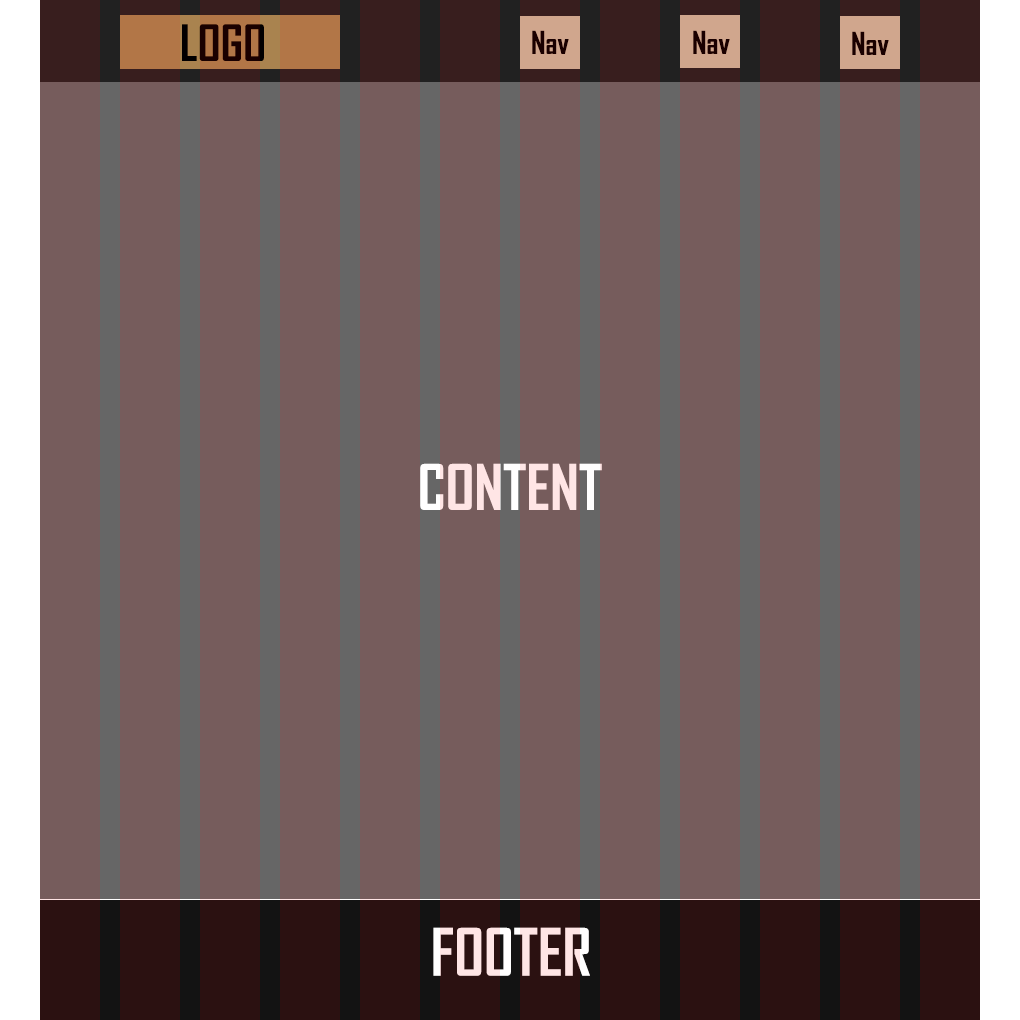
<style>
.page{position:relative;width:1020px;height:1020px;background:#765c5c}
.page>*{position:absolute;margin:0}
.t1{font:48px "AgencyFB-Bold";color:#1a0000}
.t2{font:30px "AgencyFB-Bold";color:#1a0000}
.t3{font:60px "AgencyFB-Bold"}
.t4{font:62.3px "AgencyFB-Bold";color:#ffe5e5}
</style>
<div class="page">
<p class="t1" style="left:182px;top:24px;width:82px;height:37px">LOGO</p>
<p class="t2" style="left:532px;top:30px;width:37px;height:24px">Nav</p>
<p class="t2" style="left:693px;top:30px;width:37px;height:24px">Nav</p>
<p class="t2" style="left:852px;top:31px;width:37px;height:24px">Nav</p>
<p class="t3" style="left:420px;top:463px;width:182px;height:47px">CONTENT</p>
<p class="t4" style="left:433px;top:927px;width:157px;height:49px">FOOTER</p>
</div>
